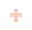
<style>
.page{position:relative;width:32px;height:30px;background:#ffffff}
.page>*{position:absolute;margin:0}
.t1{font:24px "Herald";color:#f3cfc5}
</style>
<div class="page">
<p class="t1" style="left:10px;top:9px;width:12px;height:13px">+</p>
</div>
